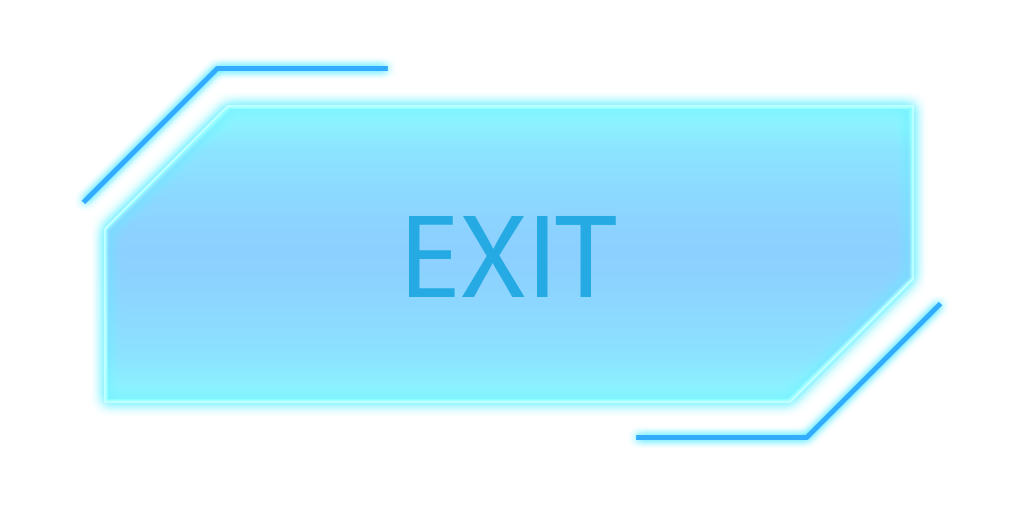
<style>
.page{position:relative;width:1024px;height:512px;background:#ffffff}
.page>*{position:absolute;margin:0}
.t1{font:120px "MyriadPro-Regular";color:#25aae3}
</style>
<div class="page">
<p class="t1" style="left:409px;top:215px;width:207px;height:82px">EXIT</p>
</div>
